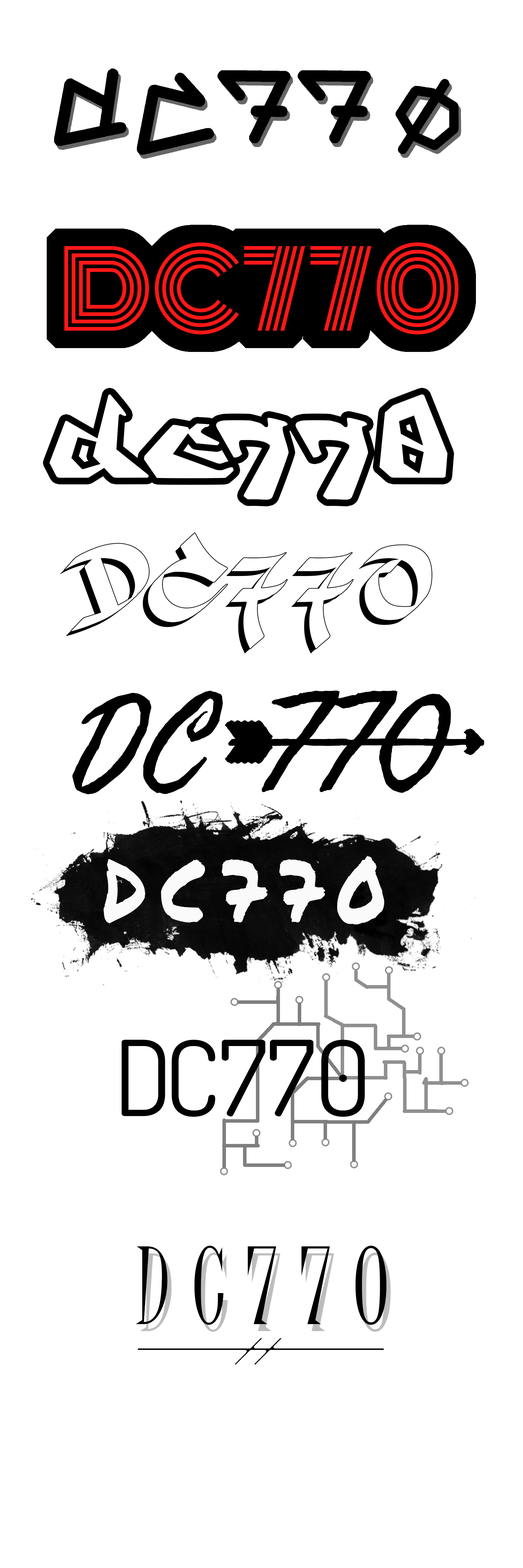
<style>
.page{position:relative;width:523px;height:1568px;background:#ffffff}
.page>*{position:absolute;margin:0}
.t1{font:104.5px "NewSymbolFont";letter-spacing:0.2em;color:#000000}
.t2{font:104.5px "Monoton-Regular";color:#ff1818}
.t3{font:104.5px "OnTheWall";color:#ffffff}
.t4{font:133.6px "SeaweedScript-Regular";color:#000000}
.t5{font:101.5px "SeaweedScript-Regular";color:#000000;scale:1.32 1}
.t6{font:87.1px "PermanentMarker";letter-spacing:0.2em;color:#fafafa;scale:0.85 1}
.t7{font:104.5px "Dosis-Regular";color:#000000}
.t8{font:104.5px "Dosis-Regular";letter-spacing:-0.075em;color:#000000}
.t9{font:104.5px "JuiceITC-Regular";letter-spacing:0.2em;color:#000000}
</style>
<div class="page">
<p class="t1" style="left:54px;top:68px;width:405px;height:87px">dc770</p>
<p class="t2" style="left:64px;top:242px;width:394px;height:93px">DC770</p>
<p class="t3" style="left:49px;top:394px;width:398px;height:106px">dc770</p>
<p class="t4" style="left:72px;top:690px;width:379px;height:104px">DC 770</p>
<p class="t5" style="left:228px;top:738px;width:65px;height:8px">_</p>
<p class="t5" style="left:280px;top:738px;width:65px;height:8px">_</p>
<p class="t5" style="left:338px;top:738px;width:64px;height:8px">_</p>
<p class="t5" style="left:384px;top:738px;width:64px;height:8px;rotate:180deg">_</p>
<p class="t5" style="left:419px;top:738px;width:65px;height:8px;rotate:180deg">_</p>
<p class="t6" style="left:103px;top:856px;width:281px;height:68px">DC770</p>
<p class="t7" style="left:121px;top:1039px;width:244px;height:78px"><span class="t8">D</span>C770</p>
<p class="t9" style="left:136px;top:1245px;width:250px;height:80px">DC770</p>
</div>
